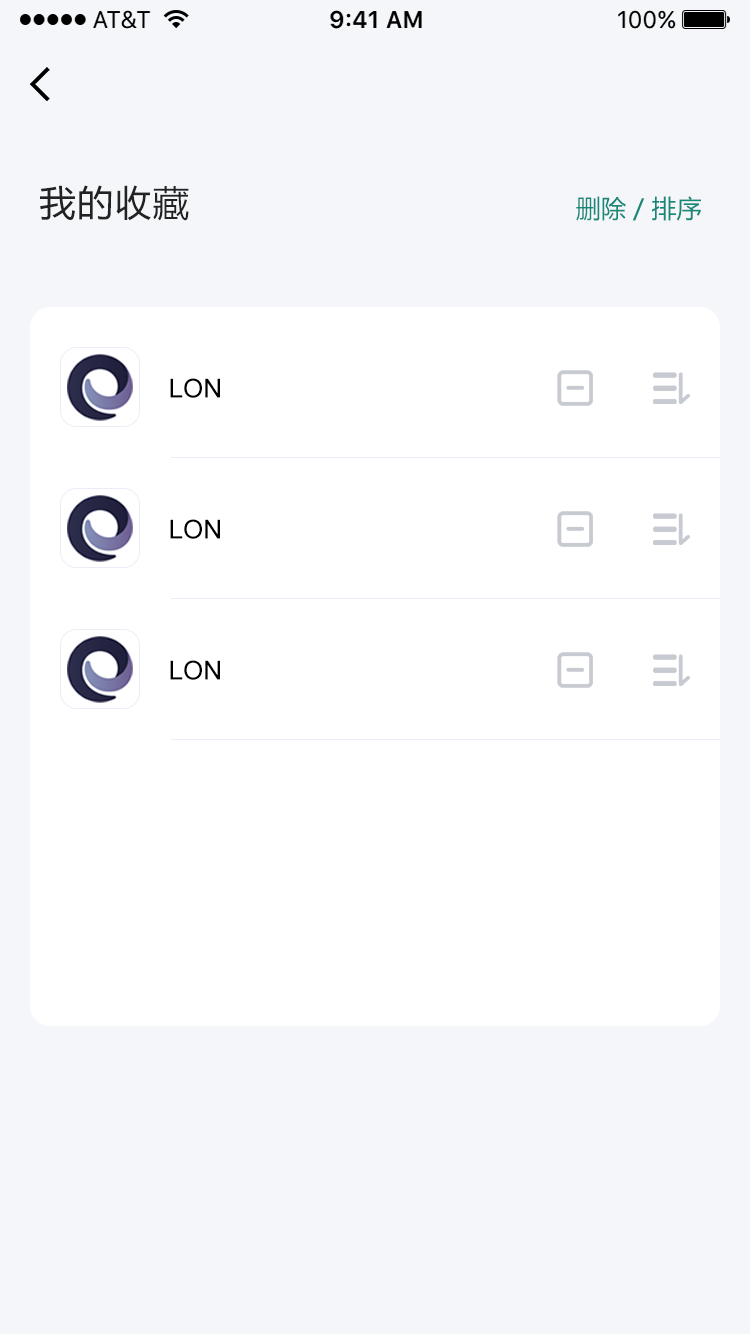
<style>
.page{position:relative;width:750px;height:1334px;background:#f5f6fa}
.page>*{position:absolute;margin:0}
.t1{font:36px "MicrosoftYaHei";letter-spacing:0.05em;color:#222222}
.t2{font:25px "MicrosoftYaHei";color:#158878}
.t3{font:26px "ArialMT";color:#000000}
</style>
<div class="page">
<p class="t1" style="left:40px;top:185px;width:149px;height:36px">我的收藏</p>
<p class="t2" style="left:576px;top:196px;width:125px;height:25px">删除 / 排序</p>
<p class="t3" style="left:170px;top:378px;width:50px;height:20px">LON</p>
<p class="t3" style="left:170px;top:519px;width:50px;height:20px">LON</p>
<p class="t3" style="left:170px;top:660px;width:50px;height:20px">LON</p>
</div>
